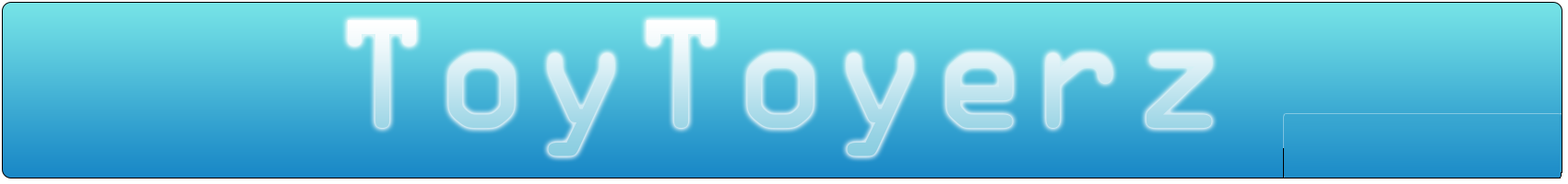
<style>
.page{position:relative;width:1568px;height:184px}
.page>*{position:absolute;margin:0}
.t1{font:138.4px "OCRAStd"}
</style>
<div class="page">
<p class="t1" style="left:348px;top:20px;width:864px;height:137px">ToyToyerz</p>
</div>
